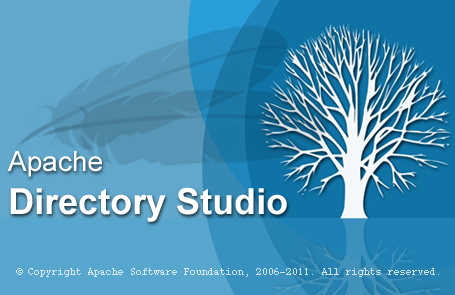
<style>
.page{position:relative;width:455px;height:295px}
.page>*{position:absolute;margin:0}
.t1{font:36px "Arial-BoldMT";color:#ffffff}
.t2{font:28px "ArialMT";color:#ffffff}
.t3{font:10px "Courier";color:#d7eaf3}
</style>
<div class="page">
<p class="t1" style="left:7px;top:151px;width:280px;height:71px"><span class="t2">Apache<br></span>Directory Studio</p>
<p class="t3" style="left:16px;top:268px;width:423px;height:9px">© Copyright Apache Software Foundation, 2006-2011. All rights reserved.</p>
</div>
